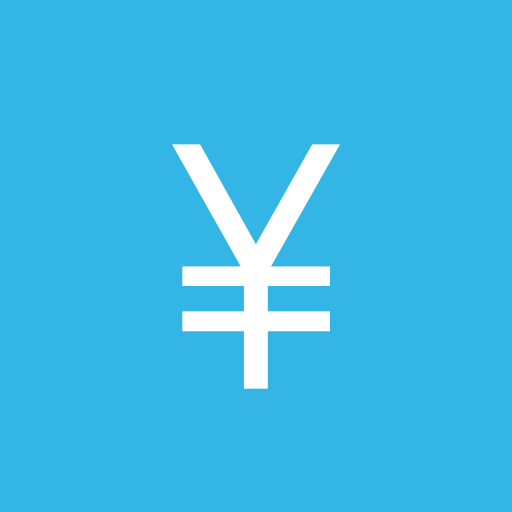
<style>
.page{position:relative;width:512px;height:512px;background:#33b5e5}
.page>*{position:absolute;margin:0}
.t1{font:340px "STHeiti";letter-spacing:0.1em;color:#ffffff}
</style>
<div class="page">
<p class="t1" style="left:172px;top:144px;width:168px;height:245px">¥</p>
</div>
